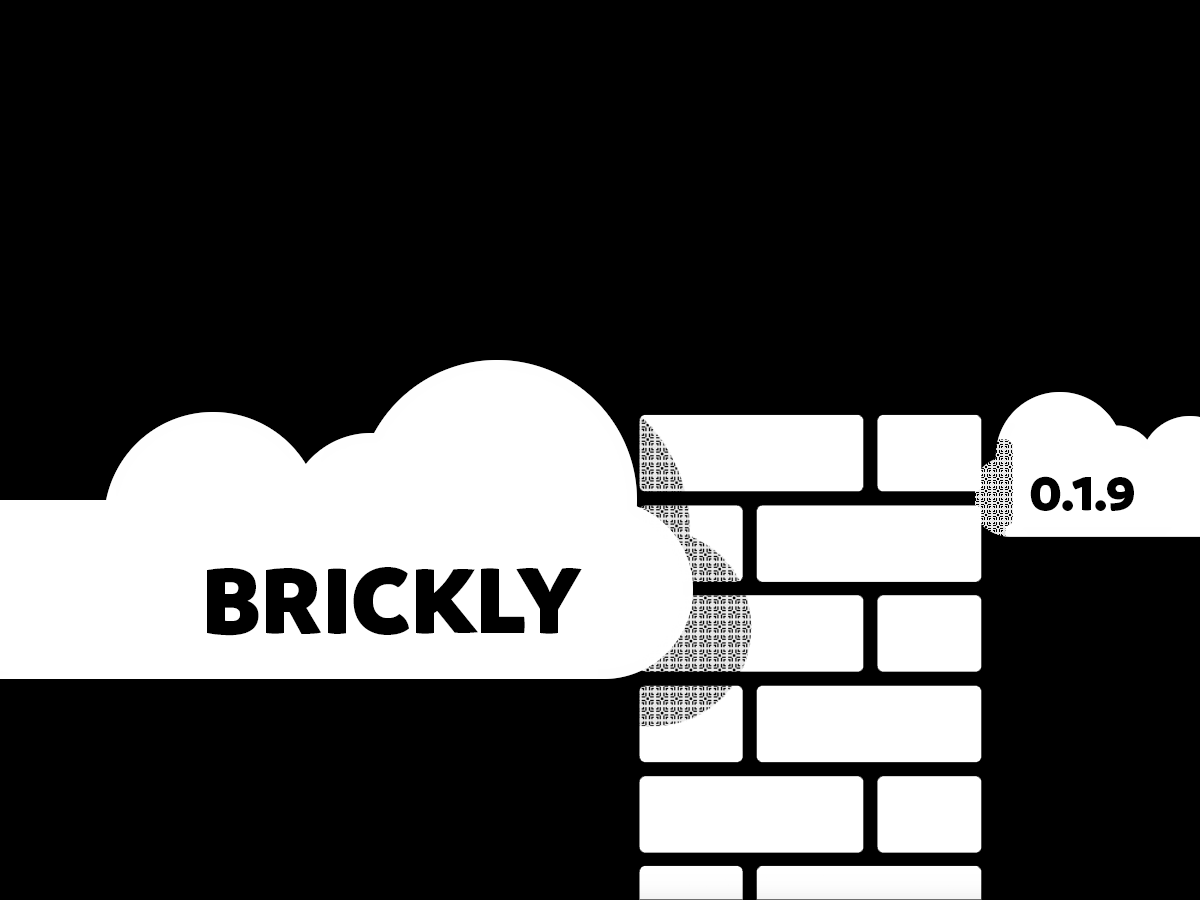
<style>
.page{position:relative;width:1200px;height:900px;background:#000000}
.page>*{position:absolute;margin:0}
.t1{font:50px "Branding-Black";color:#000000}
.t2{font:100px "Branding-Black";color:#000000}
</style>
<div class="page">
<p class="t1" style="left:1030px;top:476px;width:104px;height:35px">0.1.9</p>
<p class="t2" style="left:207px;top:567px;width:375px;height:69px">BRICKLY</p>
</div>
